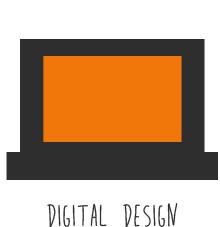
<style>
.page{position:relative;width:220px;height:227px;background:#ffffff}
.page>*{position:absolute;margin:0}
.t1{font:30px "Bite___Bullet";letter-spacing:0.01em;color:#2e2e2e}
</style>
<div class="page">
<p class="t1" style="left:47px;top:203px;width:131px;height:25px">digital design</p>
</div>
